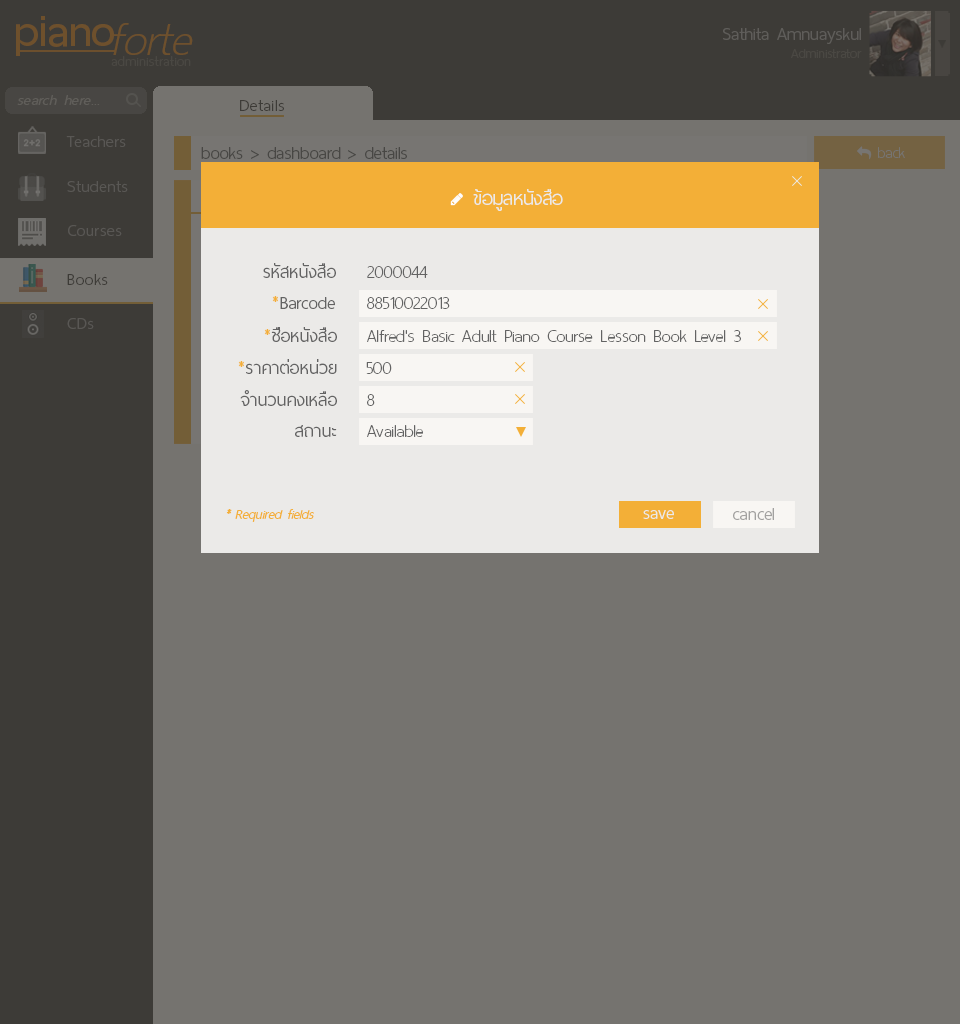
<style>
.page{position:relative;width:960px;height:1024px;background:#75736f}
.page>*{position:absolute;margin:0}
.t1{font:60px "ThaiSansNeue-SemiBold";letter-spacing:-0.005em;color:#6e502c}
.t2{font:62px "ThaiSansNeue-ExtraLightItalic";letter-spacing:-0.005em;color:#6e502c}
.t3{font:24px "ThaiSansNeue-Light";letter-spacing:-0.005em;color:#5f5d5a}
.t4{font:18px "ThaiSansNeue-Light";letter-spacing:-0.005em;color:#4a4843}
.t5{font:18.5px "ThaiSansNeue-ExtraLight";letter-spacing:0.025em;color:#4a4843}
.t6{font:20px "ThaiSansNeue-LightItalic";letter-spacing:0.025em;color:#605e5a}
.t7{font:22px "ThaiSansNeue-Light";letter-spacing:0.025em;color:#3d3b37}
.t8{font:22px "ThaiSansNeue-Light";letter-spacing:0.025em;color:#595754}
.t9{font:24px "ThaiSansNeue-Light";letter-spacing:-0.005em;color:#484744}
.t10{font:22px "ThaiSansNeue-UltraLight";color:#777572}
.t11{font:26px "ThaiSansNeue-Light";letter-spacing:-0.005em;color:#ebeae8}
.t12{font:24px "ThaiSansNeue-Light";color:#636363}
.t13{font:24px "ThaiSansNeue-UltraLight";color:#636363}
.t14{font:24px "ThaiSansNeue-Light";color:#f3af37}
.t15{font:18px "ThaiSansNeue-LightItalic";color:#f3af37}
.t16{font:24px "ThaiSansNeue-Light";letter-spacing:-0.005em;color:#ebeae8}
.t17{font:24px "ThaiSansNeue-Light";color:#a2a1a0}
</style>
<div class="page">
<p class="t1" style="left:16px;top:16px;width:98px;height:40px">piano</p>
<p class="t2" style="left:113px;top:23px;width:80px;height:32px">forte</p>
<p class="t3" style="left:723px;top:28px;width:138px;height:16px">Sathita Amnuayskul</p>
<p class="t4" style="left:791px;top:49px;width:71px;height:9px">Administrator</p>
<p class="t5" style="left:111px;top:56px;width:80px;height:10px">administration</p>
<p class="t6" style="left:17px;top:95px;width:83px;height:10px">search here...</p>
<p class="t7" style="left:240px;top:100px;width:44px;height:11px">Details</p>
<p class="t8" style="left:66px;top:136px;width:60px;height:11px">Teachers</p>
<p class="t9" style="left:201px;top:147px;width:206px;height:12px">books &gt; dashboard &gt; details</p>
<p class="t10" style="left:878px;top:147px;width:27px;height:11px">back</p>
<p class="t8" style="left:67px;top:181px;width:61px;height:11px">Students</p>
<p class="t11" style="left:473px;top:189px;width:90px;height:22px">ข้อมูลหนังสือ</p>
<p class="t8" style="left:68px;top:225px;width:54px;height:11px">Courses</p>
<p class="t12" style="left:263px;top:263px;width:73px;height:15px">รหัสหนังสือ</p>
<p class="t13" style="left:367px;top:266px;width:61px;height:12px">2000044</p>
<p class="t7" style="left:67px;top:274px;width:41px;height:11px">Books</p>
<p class="t12" style="left:272px;top:296px;width:63px;height:13px"><span class="t14">*</span>Barcode</p>
<p class="t13" style="left:367px;top:297px;width:83px;height:12px">88510022013</p>
<p class="t8" style="left:67px;top:318px;width:27px;height:11px">CDs</p>
<p class="t12" style="left:264px;top:327px;width:73px;height:15px"><span class="t14">*</span>ชื่อหนังสือ</p>
<p class="t13" style="left:367px;top:330px;width:374px;height:12px">Alfred's Basic Adult Piano Course Lesson Book Level 3</p>
<p class="t12" style="left:238px;top:359px;width:99px;height:15px"><span class="t14">*</span>ราคาต่อหน่วย</p>
<p class="t13" style="left:366px;top:362px;width:26px;height:12px">500</p>
<p class="t12" style="left:240px;top:390px;width:97px;height:16px">จำนวนคงเหลือ</p>
<p class="t13" style="left:367px;top:394px;width:8px;height:12px">8</p>
<p class="t12" style="left:295px;top:425px;width:42px;height:12px">สถานะ</p>
<p class="t13" style="left:367px;top:425px;width:56px;height:12px">Available</p>
<p class="t15" style="left:226px;top:509px;width:88px;height:13px">* Required fields</p>
<p class="t16" style="left:643px;top:510px;width:31px;height:9px">save</p>
<p class="t17" style="left:733px;top:508px;width:41px;height:12px">cancel</p>
</div>
